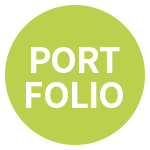
<style>
.page{position:relative;width:150px;height:150px;background:#bbd04c}
.page>*{position:absolute;margin:0}
.t1{font:35px/35px "NotoSansKR-Bold";letter-spacing:-0.03em;color:#fefefe}
</style>
<div class="page">
<p class="t1" style="left:26px;top:47px;width:97px;height:61px;text-align:center">PORT<br>FOLIO</p>
</div>
